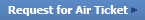
<style>
.page{position:relative;width:145px;height:20px}
.page>*{position:absolute;margin:0}
.t1{font:11px "Tahoma-Bold";color:#ffffff}
</style>
<div class="page">
<p class="t1" style="left:8px;top:5px;width:120px;height:11px">Request for Air Ticket</p>
</div>
